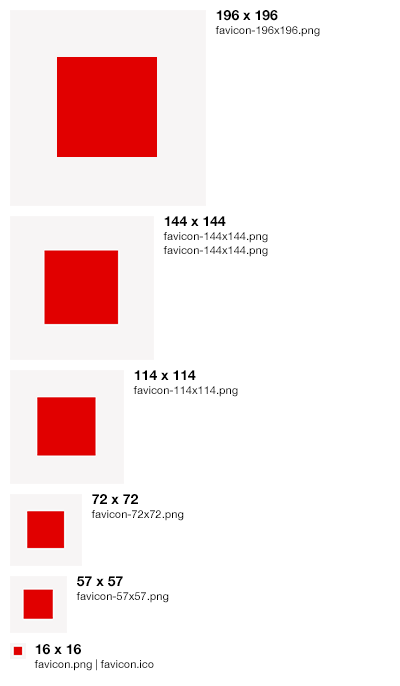
<style>
.page{position:relative;width:400px;height:686px;background:#ffffff}
.page>*{position:absolute;margin:0}
.t1{font:11px/14px "HelveticaNeue";color:#000000}
.t2{font:14px/14px "HelveticaNeue-Bold";color:#000000}
</style>
<div class="page">
<p class="t1" style="left:215px;top:10px;width:105px;height:27px"><span class="t2">196 x 196<br></span>favicon-196x196.png</p>
<p class="t1" style="left:163px;top:216px;width:105px;height:41px"><span class="t2">144 x 144<br></span>favicon-144x144.png<br>favicon-144x144.png</p>
<p class="t1" style="left:133px;top:370px;width:105px;height:27px"><span class="t2">114 x 114<br></span>favicon-114x114.png</p>
<p class="t1" style="left:91px;top:494px;width:93px;height:27px"><span class="t2">72 x 72<br></span>favicon-72x72.png</p>
<p class="t1" style="left:76px;top:576px;width:93px;height:27px"><span class="t2">57 x 57<br></span>favicon-57x57.png</p>
<p class="t1" style="left:34px;top:644px;width:120px;height:27px"><span class="t2">16 x 16<br></span>favicon.png | favicon.ico</p>
</div>
